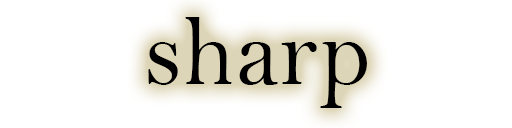
<style>
.page{position:relative;width:512px;height:128px;background:#ffffff}
.page>*{position:absolute;margin:0}
.t1{font:100px "BellMT";color:#000000}
</style>
<div class="page">
<p class="t1" style="left:148px;top:17px;width:219px;height:91px">sharp</p>
</div>
